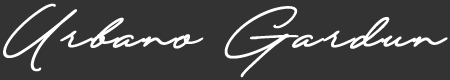
<style>
.page{position:relative;width:450px;height:80px;background:#333333}
.page>*{position:absolute;margin:0}
.t1{font:142px "QuickSignaturePersonalUse";color:#ffffff;font-weight:bold}
</style>
<div class="page">
<p class="t1" style="left:3px;top:3px;width:445px;height:75px">Urbano Gardun</p>
</div>
